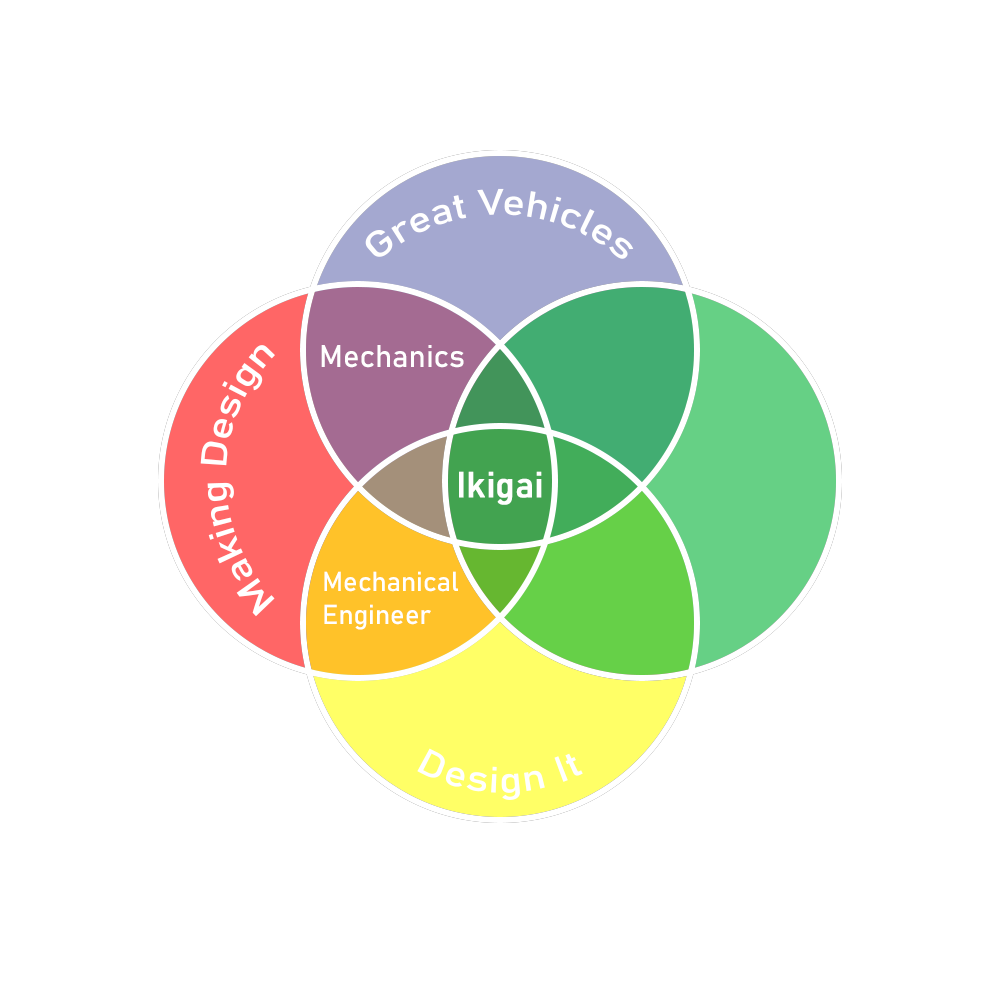
<style>
.page{position:relative;width:1000px;height:1000px;background:#ffffff}
.page>*{position:absolute;margin:0}
.t1{font:36px "Bahnschrift";color:#ffffff}
.t2{font:35.9px "Bahnschrift";color:#ffffff}
.t3{font:31.1px "Bahnschrift";color:#ffffff}
.t4{font:35.5px "Bahnschrift";color:#ffffff;font-weight:bold}
.t5{font:27.1px "Bahnschrift";color:#ffffff}
</style>
<div class="page">
<p class="t1" style="left:365px;top:188px;width:269px;height:71px;text-align:center">Great Vehicles</p>
<p class="t2" style="left:200px;top:345px;width:75px;height:272px;rotate:-90deg">Making Design</p>
<p class="t3" style="left:321px;top:345px;width:143px;height:23px">Mechanics</p>
<p class="t4" style="left:459px;top:471px;width:83px;height:34px">Ikigai</p>
<p class="t5" style="left:324px;top:571px;width:134px;height:59px">Mechanical<br>Engineer</p>
<p class="t1" style="left:417px;top:748px;width:166px;height:52px;rotate:1deg">Design It</p>
</div>
